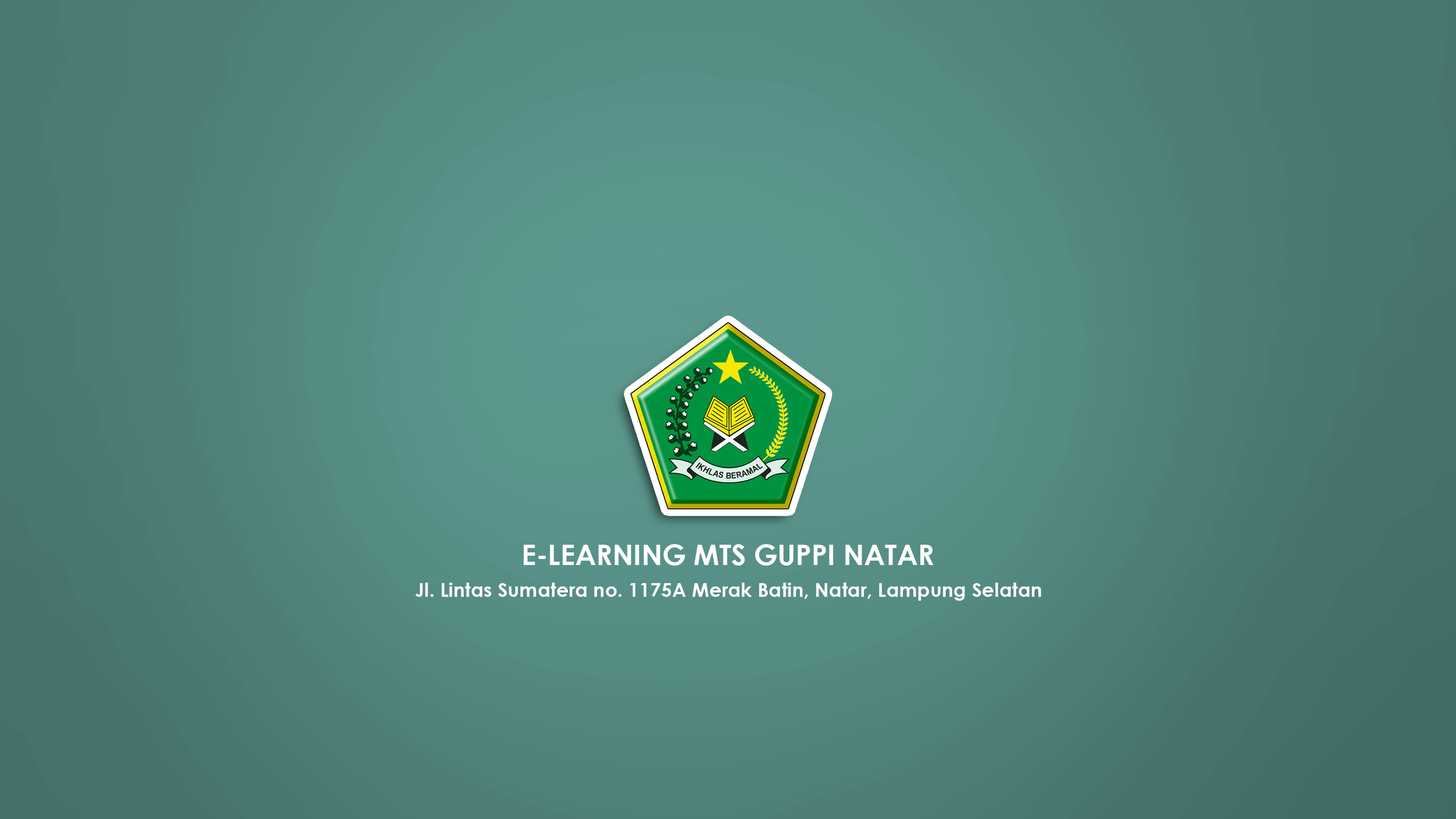
<style>
.page{position:relative;width:1456px;height:819px}
.page>*{position:absolute;margin:0}
.t1{font:28.3px "CenturyGothic-Bold";color:#ffffff}
.t2{font:19.5px "CenturyGothic-Bold";color:#ffffff}
</style>
<div class="page">
<p class="t1" style="left:524px;top:544px;width:410px;height:21px">E-LEARNING MTS GUPPI NATAR</p>
<p class="t2" style="left:415px;top:582px;width:626px;height:18px">Jl. Lintas Sumatera no. 1175A Merak Batin, Natar, Lampung Selatan</p>
</div>
